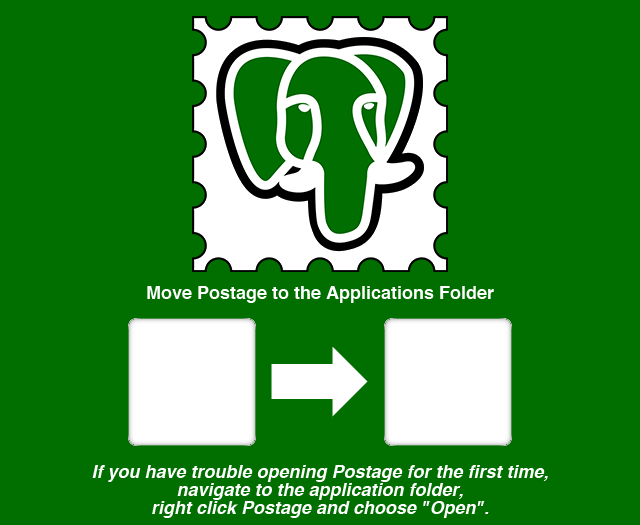
<style>
.page{position:relative;width:640px;height:525px;background:#006f00}
.page>*{position:absolute;margin:0}
.t1{font:18px "Helvetica-Bold";color:#ffffff}
.t2{font:18px/18px "Helvetica-BoldOblique";color:#ffffff}
</style>
<div class="page">
<p class="t1" style="left:147px;top:286px;width:347px;height:17px">Move Postage to the Applications Folder</p>
<p class="t2" style="left:92px;top:465px;width:456px;height:53px;text-align:center">If you have trouble opening Postage for the first time,<br>navigate to the application folder,<br>right click Postage and choose "Open".</p>
</div>
